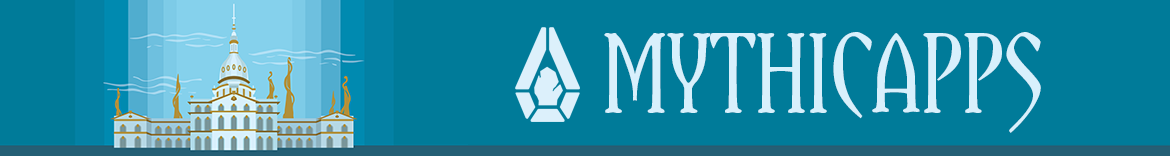
<style>
.page{position:relative;width:1170px;height:156px;background:#007b99}
.page>*{position:absolute;margin:0}
.t1{font:83px "Yataghan-Regular";color:#d8f0fc}
</style>
<div class="page">
<p class="t1" style="left:604px;top:32px;width:437px;height:101px">MYTHICAPPS</p>
</div>
